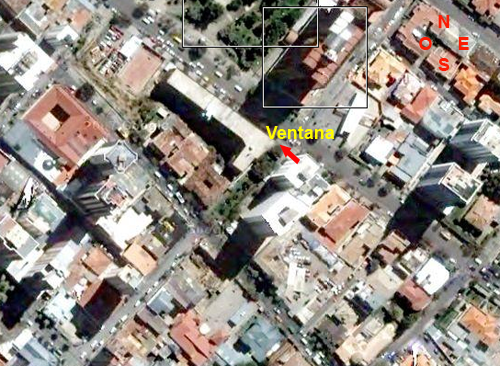
<style>
.page{position:relative;width:500px;height:366px}
.page>*{position:absolute;margin:0}
.t1{font:18px "Arial-BoldMT";color:#fa1c05}
.t2{font:18px "Arial-BoldMT";color:#fffc00}
</style>
<div class="page">
<p class="t1" style="left:419px;top:15px;width:50px;height:56px;text-align:center">N<br>O     E<br>S</p>
<p class="t2" style="left:265px;top:126px;width:70px;height:13px">Ventana</p>
</div>
